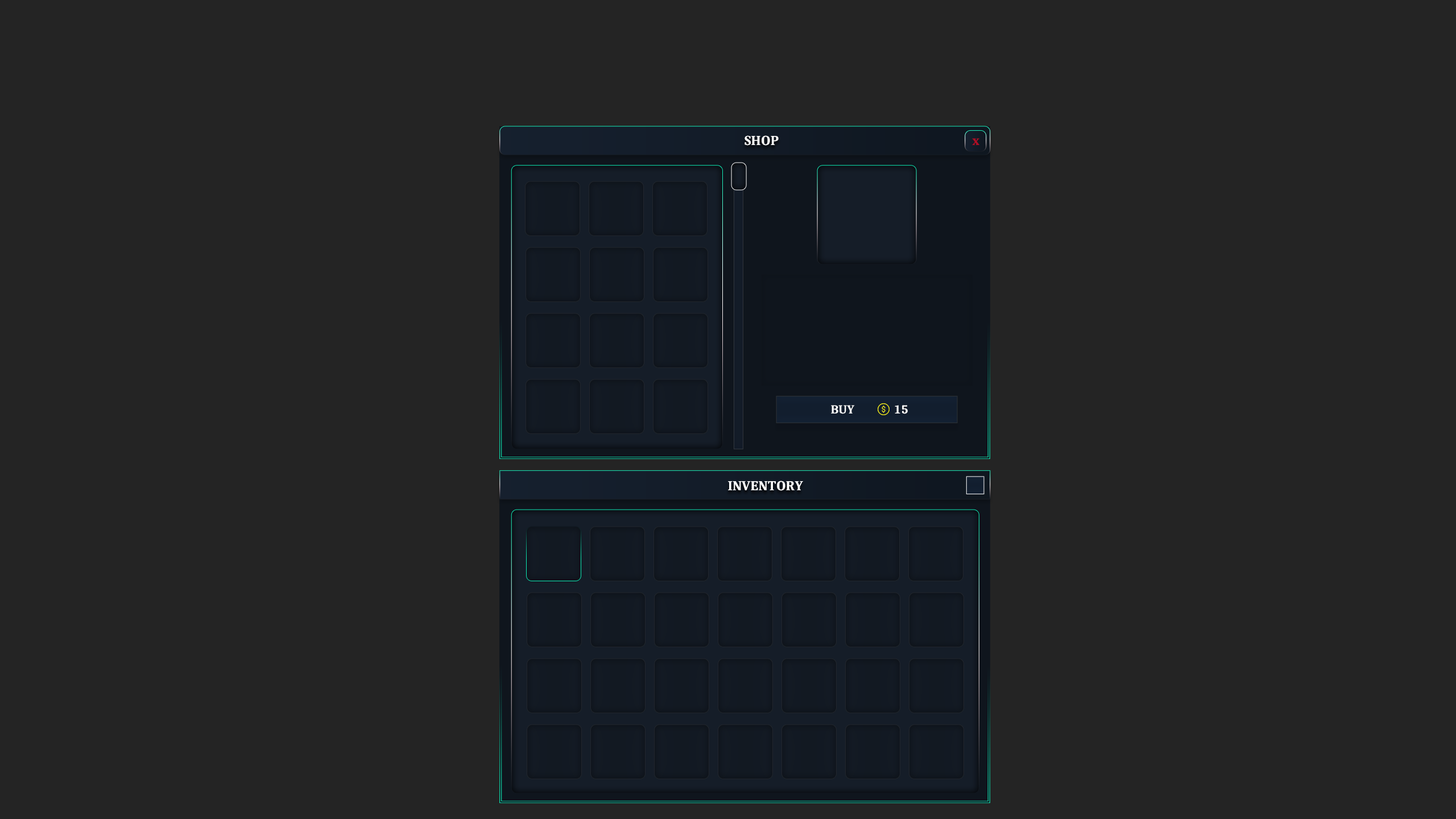
<style>
.page{position:relative;width:1456px;height:819px;background:#242424}
.page>*{position:absolute;margin:0}
.t1{font:13.6px "Caladea-Bold";color:#ffffff}
.t2{font:13.6px "Caladea-Bold";color:#b00e25}
.t3{font:12.3px "Caladea-Bold";color:#ffffff}
</style>
<div class="page">
<p class="t1" style="left:744px;top:135px;width:35px;height:11px">SHOP</p>
<p class="t2" style="left:972px;top:138px;width:7px;height:7px">x</p>
<p class="t3" style="left:831px;top:405px;width:24px;height:9px">BUY</p>
<p class="t3" style="left:895px;top:405px;width:13px;height:9px">15</p>
<p class="t1" style="left:728px;top:481px;width:75px;height:10px">INVENTORY</p>
</div>
